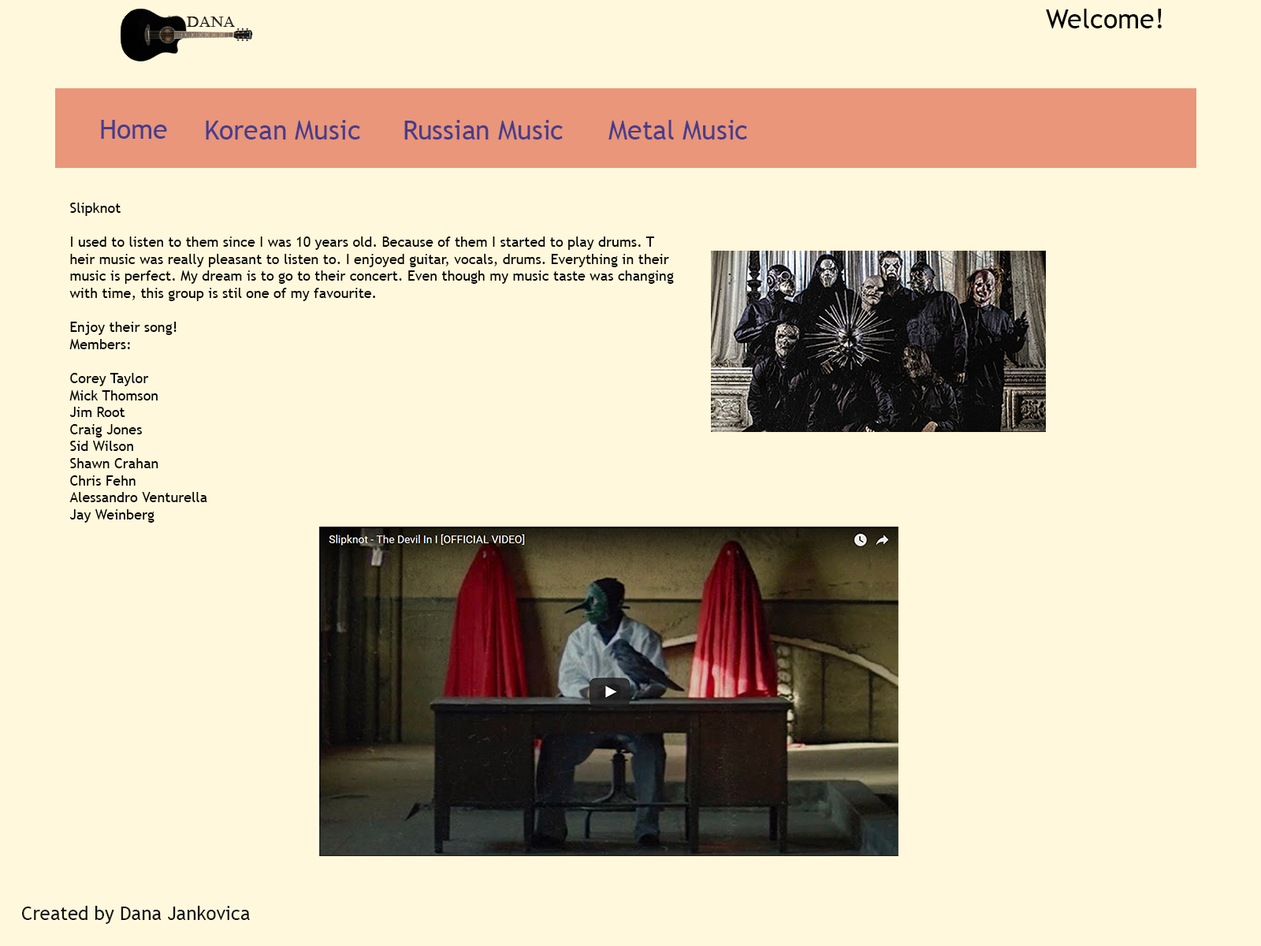
<style>
.page{position:relative;width:1261px;height:946px;background:#fff8dc}
.page>*{position:absolute;margin:0}
.t1{font:26.8px "TrebuchetMS";color:#000000}
.t2{font:26.8px "TrebuchetMS";color:#483d8b}
.t3{font:14.2px "TrebuchetMS";color:#000000}
.t4{font:18.9px "TrebuchetMS";color:#111112}
</style>
<div class="page">
<p class="t1" style="left:1046px;top:9px;width:116px;height:19px">Welcome!</p>
<p class="t2" style="left:101px;top:120px;width:66px;height:19px">Home</p>
<p class="t2" style="left:206px;top:120px;width:154px;height:19px">Korean Music</p>
<p class="t2" style="left:404px;top:120px;width:159px;height:19px">Russian Music</p>
<p class="t2" style="left:608px;top:120px;width:139px;height:19px">Metal Music</p>
<p class="t3" style="left:69px;top:203px;width:605px;height:319px">Slipknot<br><br>I used to listen to them since I was 10 years old. Because of them I started to play drums. T<br>heir music was really pleasant to listen to. I enjoyed guitar, vocals, drums. Everything in their <br>music is perfect. My dream is to go to their concert. Even though my music taste was changing <br>with time, this group is stil one of my favourite.<br><br>Enjoy their song!<br>Members:<br><br>Corey Taylor<br>Mick Thomson<br>Jim Root<br>Craig Jones<br>Sid Wilson<br>Shawn Crahan<br>Chris Fehn<br>Alessandro Venturella<br>Jay Weinberg</p>
<p class="t4" style="left:22px;top:905px;width:228px;height:19px">Created by Dana Jankovica</p>
</div>
